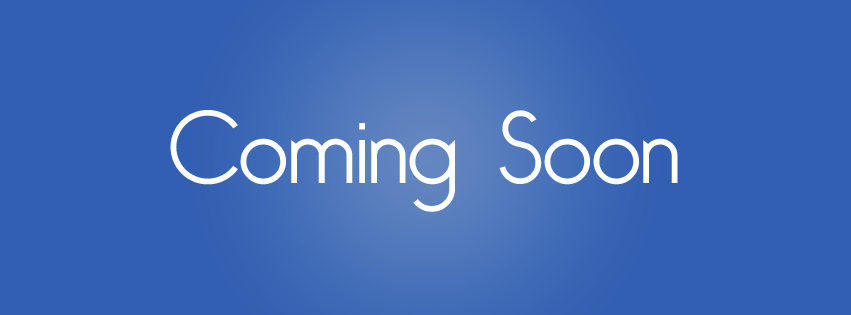
<style>
.page{position:relative;width:851px;height:315px;background:#335fb2}
.page>*{position:absolute;margin:0}
.t1{font:100px "BelleroseLight";color:#ffffff}
</style>
<div class="page">
<p class="t1" style="left:170px;top:110px;width:508px;height:102px">Coming Soon</p>
</div>
